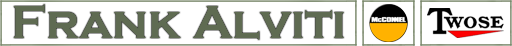
<style>
.page{position:relative;width:512px;height:46px;background:#ffffff}
.page>*{position:absolute;margin:0}
.t1{font:48px "CopperplateGothic-Bold";color:#5f6b52}
</style>
<div class="page">
<p class="t1" style="left:13px;top:4px;width:331px;height:36px">Frank Alviti</p>
</div>
